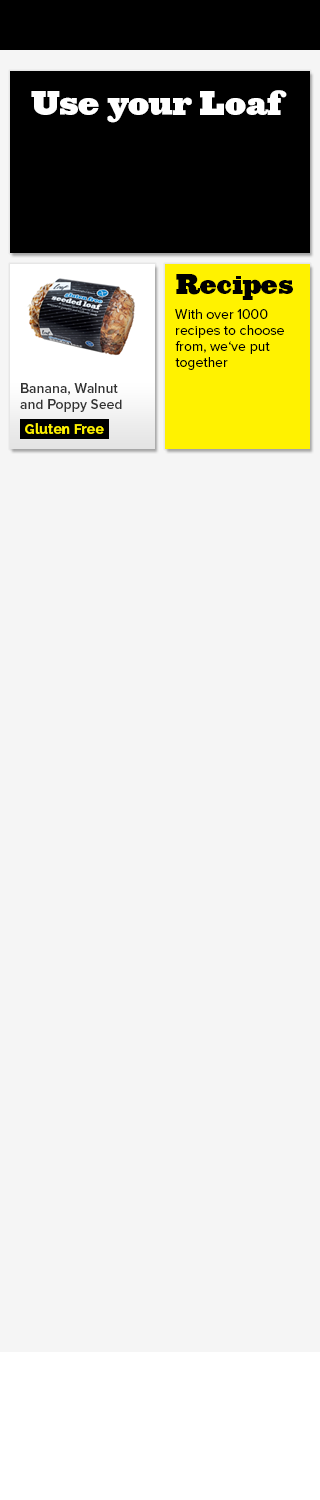
<style>
.page{position:relative;width:320px;height:1500px;background:#f5f5f5}
.page>*{position:absolute;margin:0}
.t1{font:32px "Ziggurat-HTF-Black";color:#ffffff}
.t2{font:26px "Ziggurat-HTF-Black";color:#000000}
.t3{font:14px/16px "ProximaNova-Regular";color:#000000}
.t4{font:14px/16px "ProximaNova-Semibold";color:#333333}
.t5{font:14px "Raleway-Bold";color:#fff200}
</style>
<div class="page">
<p class="t1" style="left:31px;top:90px;width:256px;height:33px">Use your Loaf</p>
<p class="t2" style="left:176px;top:274px;width:117px;height:26px">Recipes</p>
<p class="t3" style="left:175px;top:309px;width:109px;height:61px">With over 1000 recipes to choose from, we‘ve put together</p>
<p class="t4" style="left:20px;top:383px;width:102px;height:29px">Banana, Walnut and Poppy Seed</p>
<p class="t5" style="left:25px;top:423px;width:79px;height:11px">Gluten Free</p>
</div>
